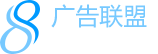
<style>
.page{position:relative;width:158px;height:54px;background:#ffffff}
.page>*{position:absolute;margin:0}
.t1{font:24px "MicrosoftYaHei";color:#77c9ff}
</style>
<div class="page">
<p class="t1" style="left:51px;top:4px;width:96px;height:24px">广告联盟</p>
</div>
